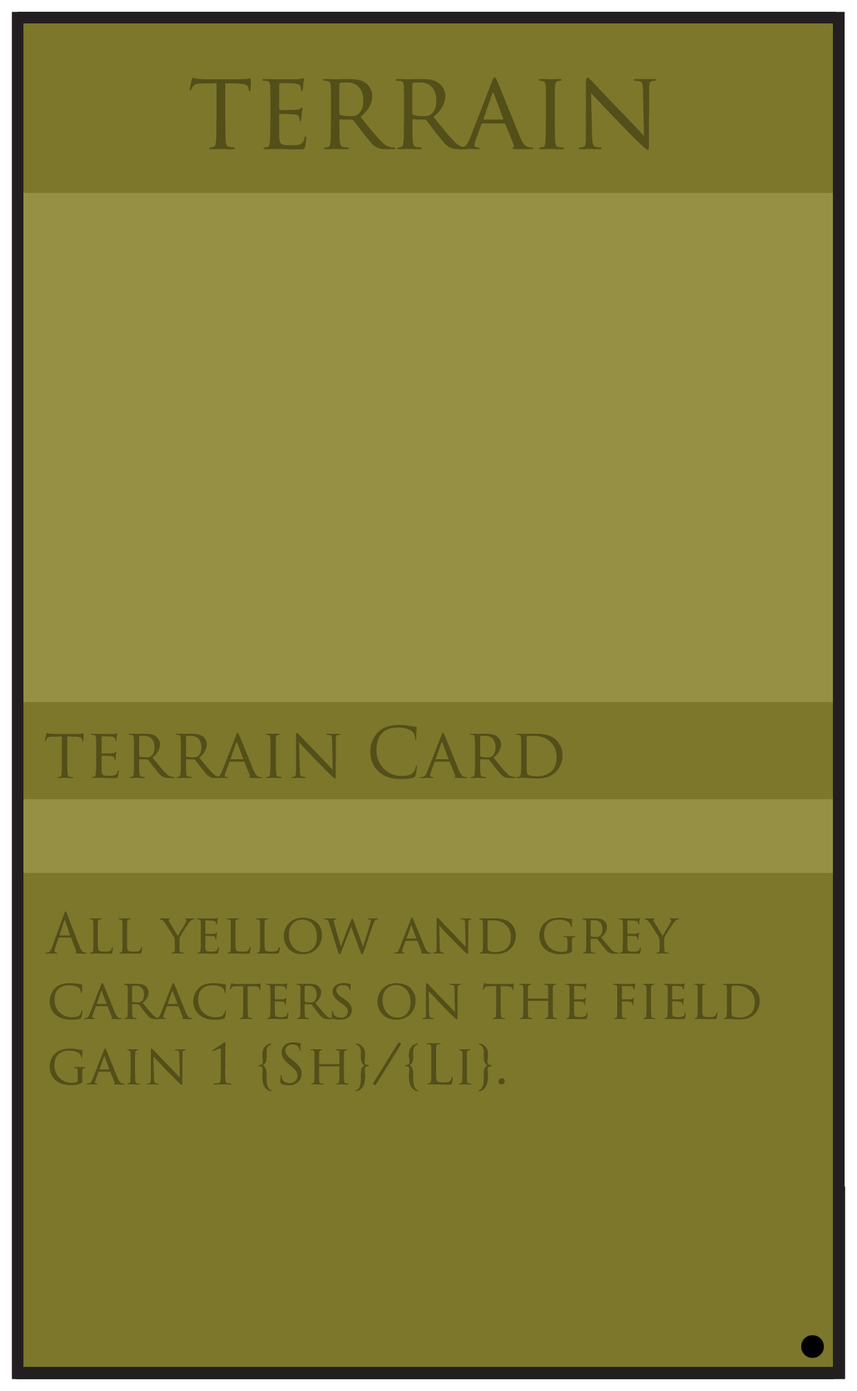
<style>
.page{position:relative;width:857px;height:1391px;background:#7c772b}
.page>*{position:absolute;margin:0}
.t1{font:109.1px "TrajanPro-Regular";color:#534f19}
.t2{font:68.9px "TrajanPro-Regular";color:#534f19}
.t3{font:54.5px "TrajanPro-Regular";color:#534f19}
</style>
<div class="page">
<p class="t1" style="left:189px;top:77px;width:467px;height:73px">terrain</p>
<p class="t2" style="left:45px;top:725px;width:518px;height:54px">terrain Card</p>
<p class="t3" style="left:45px;top:912px;width:715px;height:179px">All yellow and grey <br>caracters on the field <br>gain 1 {Sh}/{Li}.</p>
</div>
